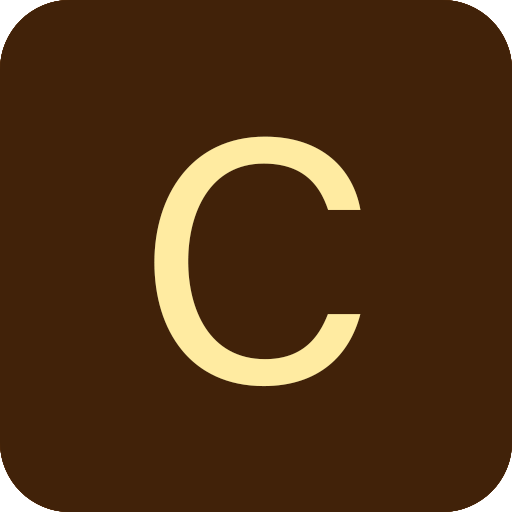
<style>
.page{position:relative;width:512px;height:512px;background:#412209}
.page>*{position:absolute;margin:0}
.t1{font:349px "AcuminConcept-Regular";color:#ffeba1}
</style>
<div class="page">
<p class="t1" style="left:154px;top:136px;width:207px;height:251px">C</p>
</div>
